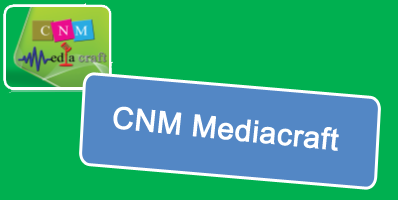
<style>
.page{position:relative;width:398px;height:200px;background:#00b050}
.page>*{position:absolute;margin:0}
.t1{font:30px "ArialMT";color:#ffffff;font-weight:bold}
</style>
<div class="page">
<p class="t1" style="left:113px;top:106px;width:226px;height:45px;rotate:6deg">CNM Mediacraft</p>
</div>
